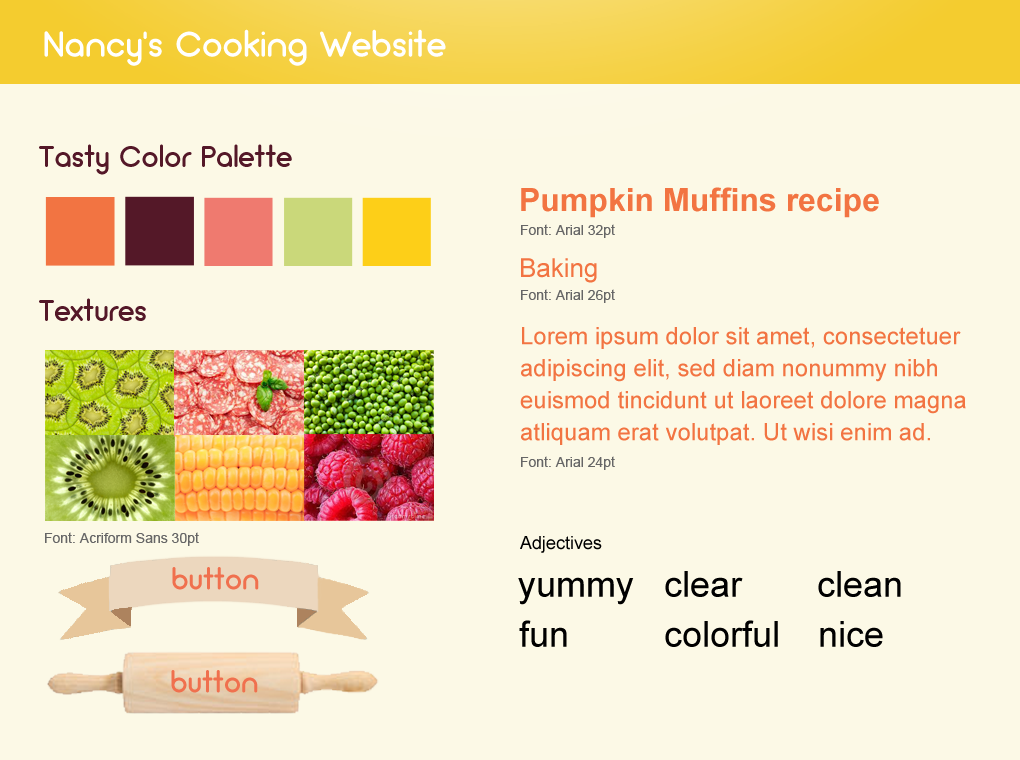
<style>
.page{position:relative;width:1020px;height:760px;background:#fcf9e6}
.page>*{position:absolute;margin:0}
.t1{font:36px "Arciform";letter-spacing:0.02em;color:#ffffff}
.t2{font:30px "Arciform";letter-spacing:0.02em;color:#541828}
.t3{font:32px "Arial-BoldMT";color:#f27442}
.t4{font:14px "ArialMT";color:#666666}
.t5{font:26px "ArialMT";color:#f27442}
.t6{font:24px/32px "ArialMT";color:#f27442}
.t7{font:18px "ArialMT";color:#000000}
.t8{font:30px "Arciform";letter-spacing:0.02em;color:#f0704e}
.t9{font:36px "ArialMT";color:#000000}
</style>
<div class="page">
<p class="t1" style="left:44px;top:29px;width:402px;height:37px">Nancy’s Cooking Website</p>
<p class="t2" style="left:39px;top:144px;width:253px;height:31px">Tasty Color Palette</p>
<p class="t3" style="left:521px;top:187px;width:358px;height:31px">Pumpkin Muffins recipe</p>
<p class="t4" style="left:521px;top:224px;width:94px;height:14px">Font: Arial 32pt</p>
<p class="t5" style="left:521px;top:258px;width:76px;height:25px">Baking</p>
<p class="t4" style="left:521px;top:289px;width:94px;height:14px">Font: Arial 26pt</p>
<p class="t2" style="left:39px;top:298px;width:107px;height:23px">Textures</p>
<p class="t6" style="left:520px;top:327px;width:446px;height:118px">Lorem ipsum dolor sit amet, consectetuer adipiscing elit, sed diam nonummy nibh euismod tincidunt ut laoreet dolore magna atliquam erat volutpat. Ut wisi enim ad.</p>
<p class="t4" style="left:521px;top:456px;width:94px;height:14px">Font: Arial 24pt</p>
<p class="t4" style="left:45px;top:532px;width:154px;height:14px">Font: Acriform Sans 30pt</p>
<p class="t7" style="left:520px;top:536px;width:82px;height:17px">Adjectives</p>
<p class="t8" style="left:172px;top:567px;width:87px;height:23px">button</p>
<p class="t9" style="left:518px;top:577px;width:116px;height:28px">yummy</p>
<p class="t9" style="left:665px;top:571px;width:78px;height:26px">clear</p>
<p class="t9" style="left:818px;top:571px;width:83px;height:26px">clean</p>
<p class="t9" style="left:519px;top:620px;width:48px;height:27px">fun</p>
<p class="t9" style="left:665px;top:620px;width:113px;height:27px">colorful</p>
<p class="t9" style="left:820px;top:621px;width:63px;height:26px">nice</p>
<p class="t8" style="left:171px;top:670px;width:87px;height:23px">button</p>
</div>
